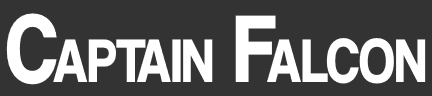
<style>
.page{position:relative;width:432px;height:96px;background:#333333}
.page>*{position:absolute;margin:0}
.t1{font:100px "CoolveticaRg-Bold";color:#ffffff;font-variant:small-caps;scale:0.83 1}
</style>
<div class="page">
<p class="t1" style="left:6px;top:13px;width:420px;height:72px">Captain Falcon</p>
</div>
